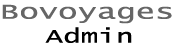
<style>
.page{position:relative;width:179px;height:52px;background:#ffffff}
.page>*{position:absolute;margin:0}
.t1{font:22px "LucidaConsole";color:#666666;scale:1.46 1}
.t2{font:20px "LucidaConsole";color:#000000;scale:1.46 1}
</style>
<div class="page">
<p class="t1" style="left:2px;top:4px;width:170px;height:39px">Bovoyages<br><span class="t2">Admin</span></p>
</div>
